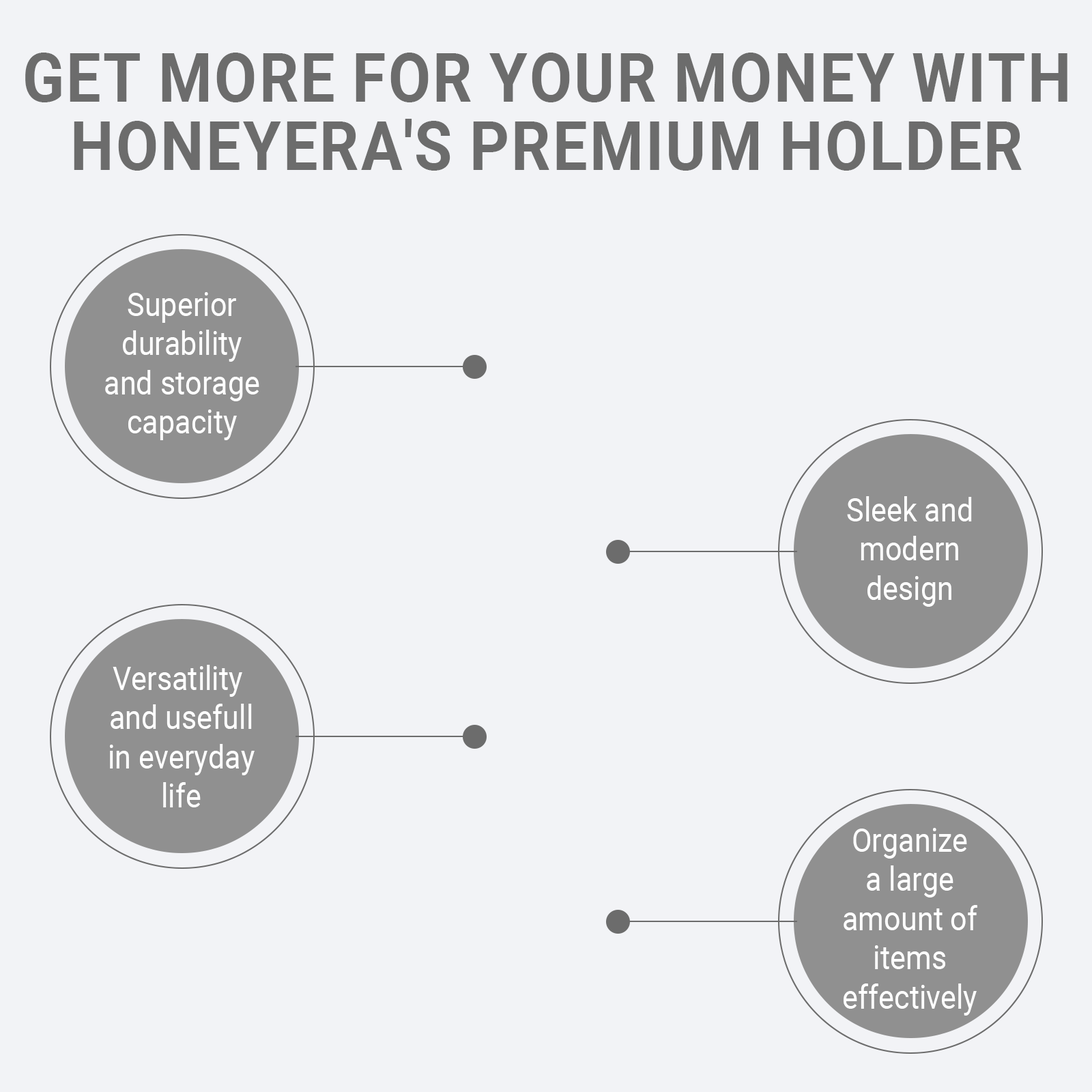
<style>
.page{position:relative;width:1092px;height:1092px;background:#f2f3f6}
.page>*{position:absolute;margin:0}
.t1{font:68.2px/68.2px "Roboto-Bold";color:#6c6c6c;text-transform:uppercase;scale:0.9 1}
.t2{font:32.8px "Roboto-Regular";color:#ffffff;scale:0.9 1}
</style>
<div class="page">
<p class="t1" style="left:25px;top:53px;width:1042px;height:118px;text-align:center">Get more for your money with<br>honeyera's premium holder</p>
<p class="t2" style="left:105px;top:292px;width:154px;height:148px;text-align:center">Superior<br>durability<br>and storage<br>capacity</p>
<p class="t2" style="left:847px;top:496px;width:125px;height:111px;text-align:center">Sleek and<br>modern<br>design</p>
<p class="t2" style="left:110px;top:665px;width:145px;height:142px;text-align:center">Versatility <br>and usefull<br>in everyday<br>life</p>
<p class="t2" style="left:844px;top:828px;width:133px;height:188px;text-align:center">Organize<br>a large<br>amount of<br>items<br>effectively</p>
</div>
